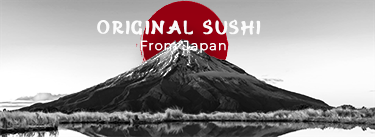
<style>
.page{position:relative;width:375px;height:137px}
.page>*{position:absolute;margin:0}
.t1{font:19px "SVN-HiroMisake-Regular";letter-spacing:0.1em;color:#fafafa;font-weight:bold}
.t2{font:12.7px "MontserratRoman-Light";letter-spacing:0.1em;color:#ffffff;font-weight:bold}
</style>
<div class="page">
<p class="t1" style="left:97px;top:19px;width:164px;height:17px">Original sushi</p>
<p class="t2" style="left:140px;top:40px;width:86px;height:13px">From Japan</p>
</div>
